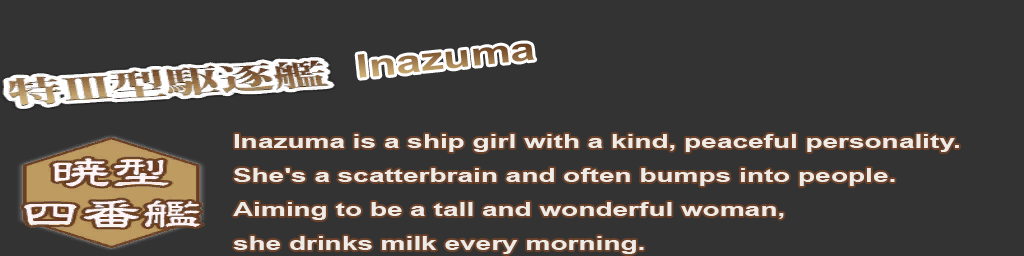
<style>
.page{position:relative;width:1024px;height:256px;background:#333333}
.page>*{position:absolute;margin:0}
.t1{font:19px/34px "Arial-BoldMT";color:#efebe7;scale:1.47 1}
</style>
<div class="page">
<p class="t1" style="left:233px;top:134px;width:726px;height:120px">Inazuma is a ship girl with a kind, peaceful personality. <br>She's a scatterbrain and often bumps into people. <br>Aiming to be a tall and wonderful woman, <br>she drinks milk every morning.</p>
</div>
